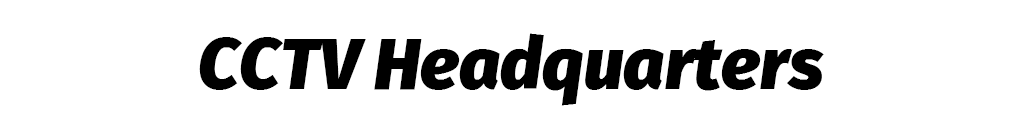
<style>
.page{position:relative;width:1024px;height:128px;background:#ffffff}
.page>*{position:absolute;margin:0}
.t1{font:71.8px "FiraSans-BlackItalic";color:#000000}
</style>
<div class="page">
<p class="t1" style="left:199px;top:33px;width:625px;height:73px">CCTV Headquarters</p>
</div>
